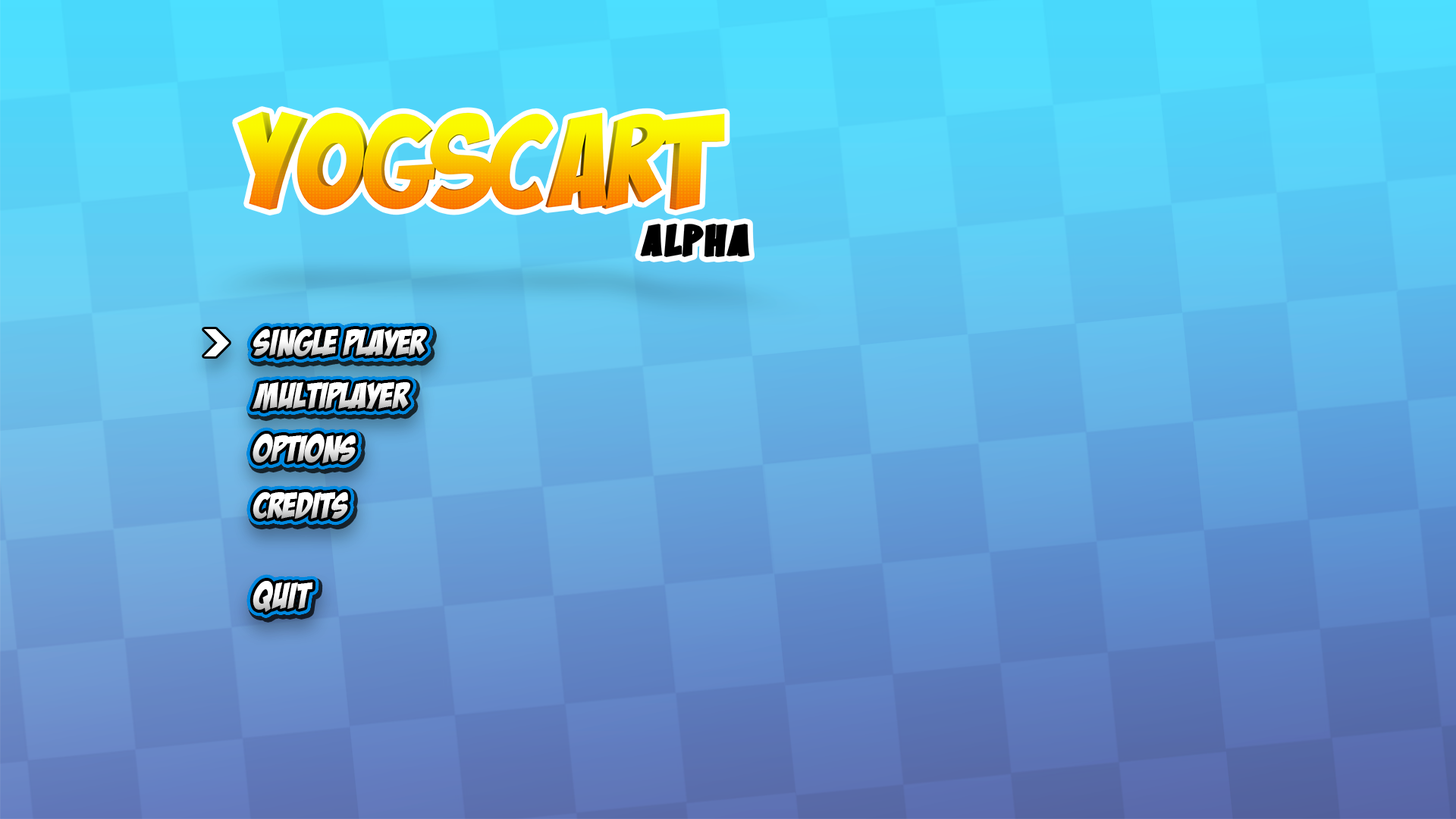
<style>
.page{position:relative;width:1456px;height:819px}
.page>*{position:absolute;margin:0}
.t1{font:36.4px "BadaBoomBB";color:#ffffff;text-transform:uppercase}
</style>
<div class="page">
<p class="t1" style="left:253px;top:329px;width:174px;height:28px">Single player</p>
<p class="t1" style="left:253px;top:382px;width:157px;height:28px">Multiplayer</p>
<p class="t1" style="left:253px;top:434px;width:103px;height:29px">Options</p>
<p class="t1" style="left:253px;top:492px;width:95px;height:27px">Credits</p>
<p class="t1" style="left:253px;top:581px;width:60px;height:31px">Quit</p>
</div>
